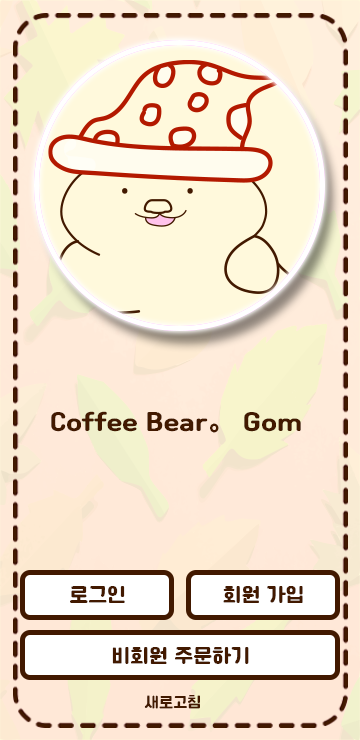
<style>
.page{position:relative;width:360px;height:740px}
.page>*{position:absolute;margin:0}
.t1{font:25px "Cafe24Ssurround";color:#421900}
.t2{font:25px "NotoSansKR-Black";color:#421900}
.t3{font:20px "Cafe24Ssurround";color:#421900}
.t4{font:15px "Cafe24Ssurround";color:#421900}
</style>
<div class="page">
<p class="t1" style="left:51px;top:411px;width:250px;height:21px">Coffee Bear 。Gom</p>
<p class="t2" style="left:210px;top:423px;width:9px;height:10px">。</p>
<p class="t3" style="left:70px;top:586px;width:55px;height:17px">로그인</p>
<p class="t3" style="left:223px;top:586px;width:80px;height:17px">회원 가입</p>
<p class="t3" style="left:112px;top:647px;width:137px;height:17px">비회원 주문하기</p>
<p class="t4" style="left:144px;top:695px;width:56px;height:14px">새로고침</p>
</div>
